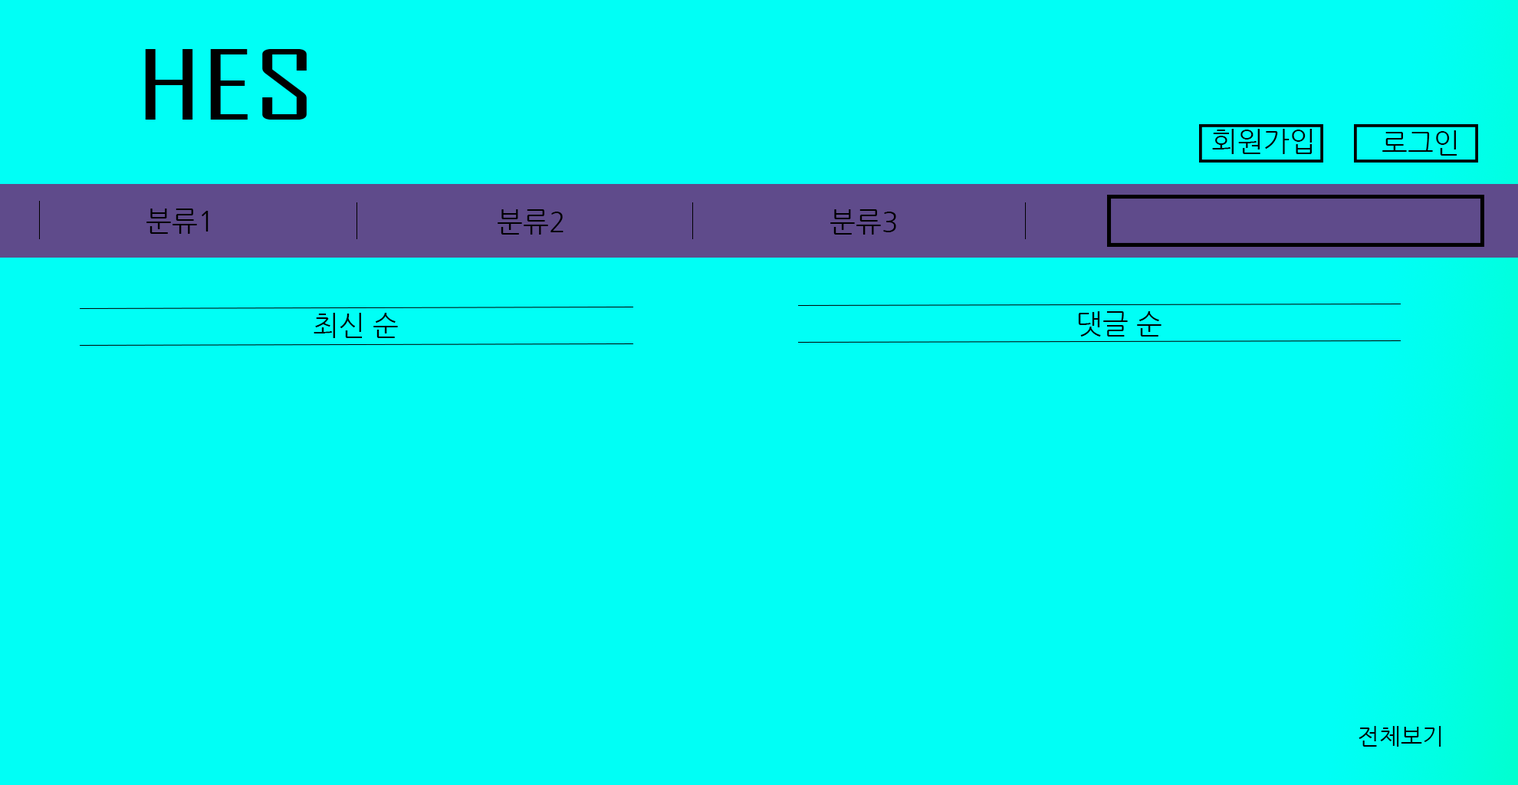
<style>
.page{position:relative;width:1518px;height:785px;background:#00fff6}
.page>*{position:absolute;margin:0}
.t1{font:92.1px "AgencyFB-Reg";color:#000000;scale:1.6 1}
.t2{font:27.6px "NanumGothic";color:#000000}
.t3{font:23px "NanumGothic";color:#000000}
</style>
<div class="page">
<p class="t1" style="left:145px;top:49px;width:162px;height:71px">HES</p>
<p class="t2" style="left:1212px;top:129px;width:100px;height:25px">회원가입</p>
<p class="t2" style="left:1383px;top:130px;width:75px;height:26px">로그인</p>
<p class="t2" style="left:146px;top:209px;width:63px;height:25px">분류1</p>
<p class="t2" style="left:498px;top:209px;width:66px;height:26px">분류2</p>
<p class="t2" style="left:831px;top:209px;width:65px;height:26px">분류3</p>
<p class="t2" style="left:314px;top:313px;width:84px;height:25px">최신 순</p>
<p class="t2" style="left:1078px;top:311px;width:84px;height:26px">댓글 순</p>
<p class="t3" style="left:1359px;top:726px;width:83px;height:21px">전체보기</p>
</div>
